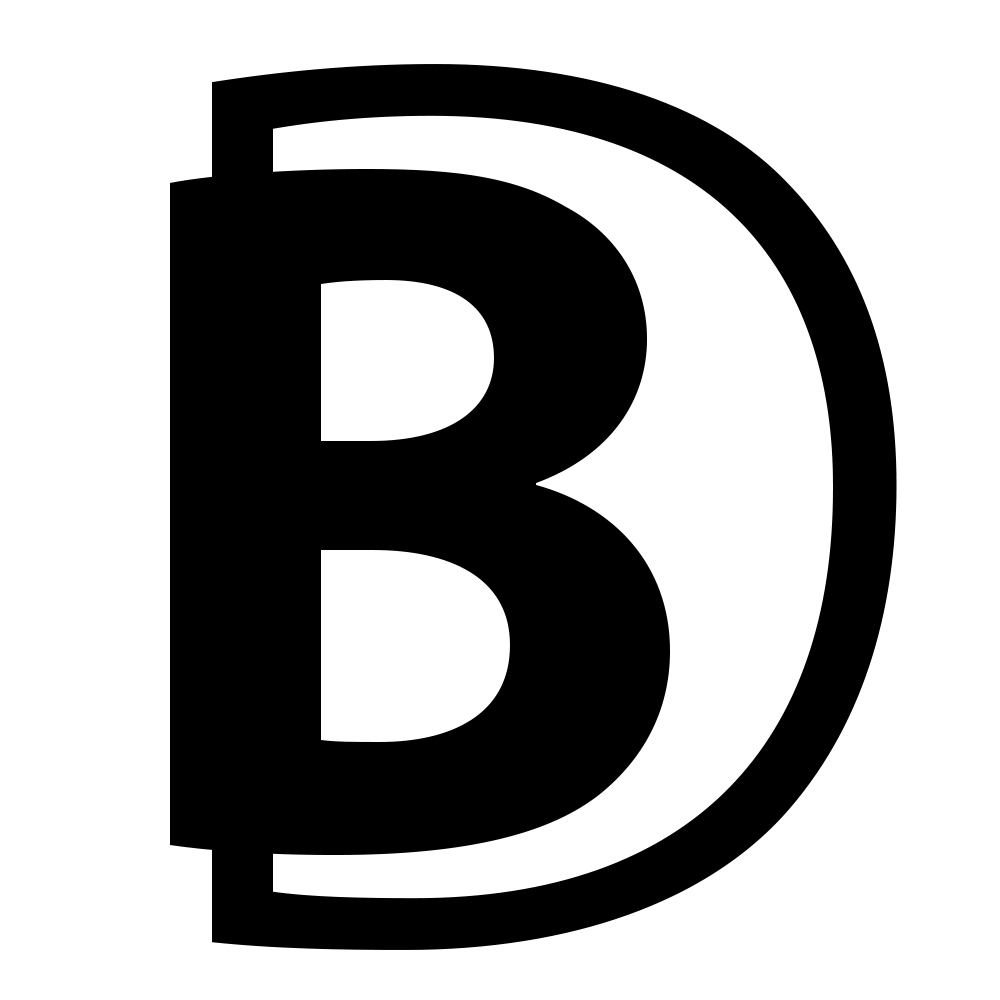
<style>
.page{position:relative;width:1000px;height:1000px;background:#ffffff}
.page>*{position:absolute;margin:0}
.t1{font:1296px "MyriadPro-Light";letter-spacing:0.025em;color:#000000}
.t2{font:1000px "MyriadPro-Bold";letter-spacing:0.025em;color:#000000}
</style>
<div class="page">
<p class="t1" style="left:212px;top:64px;width:685px;height:886px">D</p>
<p class="t2" style="left:170px;top:169px;width:500px;height:686px">B</p>
</div>
